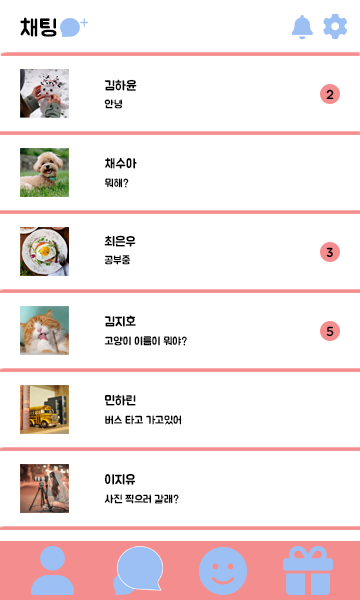
<style>
.page{position:relative;width:360px;height:600px;background:#ffffff}
.page>*{position:absolute;margin:0}
.t1{font:23px "BMJUA";color:#000000}
.t2{font:13px "BMJUA";color:#000000}
.t3{font:11px "BMJUA";color:#000000}
</style>
<div class="page">
<p class="t1" style="left:20px;top:17px;width:37px;height:20px">채팅</p>
<p class="t2" style="left:104px;top:79px;width:33px;height:12px">김하윤</p>
<p class="t2" style="left:326px;top:89px;width:8px;height:11px">2</p>
<p class="t3" style="left:104px;top:99px;width:19px;height:10px">안녕</p>
<p class="t2" style="left:105px;top:157px;width:32px;height:12px">채수아</p>
<p class="t3" style="left:104px;top:178px;width:25px;height:10px">뭐해?</p>
<p class="t2" style="left:104px;top:235px;width:32px;height:12px">최은우</p>
<p class="t3" style="left:104px;top:255px;width:27px;height:10px">공부중</p>
<p class="t2" style="left:326px;top:247px;width:7px;height:11px">3</p>
<p class="t2" style="left:104px;top:315px;width:32px;height:12px">김지호</p>
<p class="t2" style="left:326px;top:326px;width:8px;height:11px">5</p>
<p class="t3" style="left:104px;top:336px;width:83px;height:10px">고양이 이름이 뭐야?</p>
<p class="t2" style="left:104px;top:394px;width:32px;height:12px">민하린</p>
<p class="t3" style="left:105px;top:415px;width:77px;height:10px">버스 타고 가고있어</p>
<p class="t2" style="left:104px;top:473px;width:32px;height:12px">이지유</p>
<p class="t3" style="left:104px;top:494px;width:75px;height:10px">사진 찍으러 갈래?</p>
</div>
